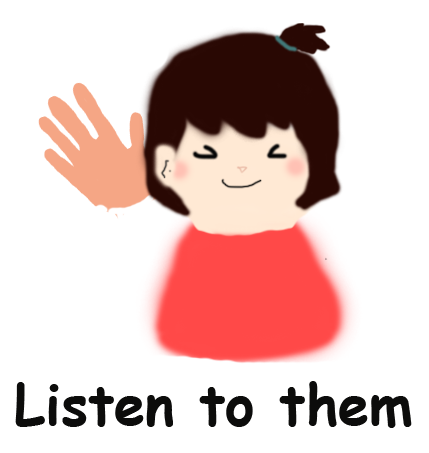
<style>
.page{position:relative;width:429px;height:453px;background:#ffffff}
.page>*{position:absolute;margin:0}
.t1{font:56px "ComicSansMS-Bold";color:#0c0c0b}
</style>
<div class="page">
<p class="t1" style="left:15px;top:381px;width:397px;height:47px">Listen to them</p>
</div>
